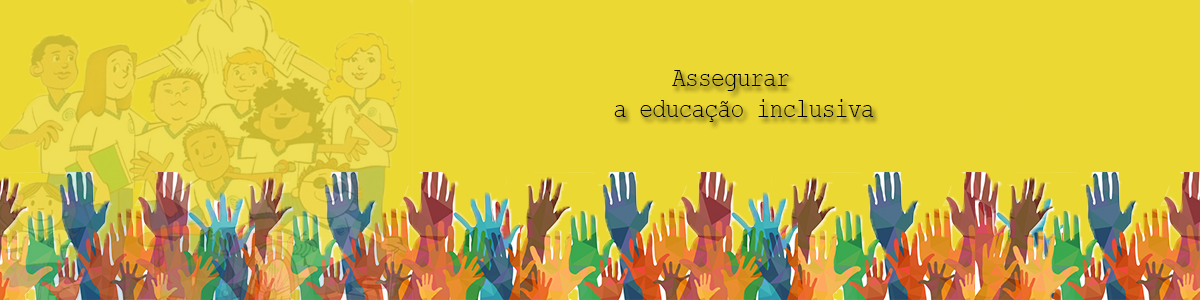
<style>
.page{position:relative;width:1200px;height:300px;background:#ecd833}
.page>*{position:absolute;margin:0}
.t1{font:26.6px "CourierNewPSMT";letter-spacing:-0.03em;color:#000000;scale:0.86 1}
</style>
<div class="page">
<p class="t1" style="left:614px;top:70px;width:260px;height:52px;text-align:center">Assegurar <br> a educação inclusiva</p>
</div>
